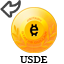
<style>
.page{position:relative;width:64px;height:64px;background:#ffffff}
.page>*{position:absolute;margin:0}
.t1{font:10px "Georgia";color:#000000}
</style>
<div class="page">
<p class="t1" style="left:20px;top:56px;width:28px;height:7px">USDE</p>
</div>
